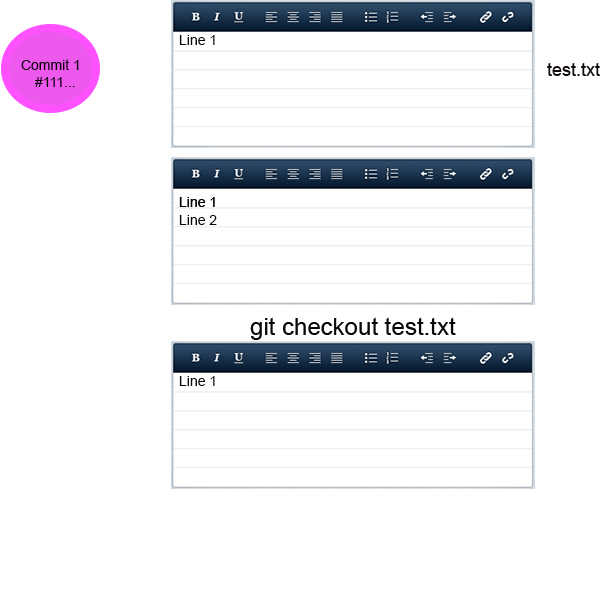
<style>
.page{position:relative;width:600px;height:609px;background:#ffffff}
.page>*{position:absolute;margin:0}
.t1{font:14px "ArialMT";color:#070707}
.t2{font:18px "ArialMT";color:#110b0b}
.t3{font:24px "ArialMT";color:#070707}
</style>
<div class="page">
<p class="t1" style="left:179px;top:35px;width:36px;height:10px">Line 1</p>
<p class="t1" style="left:21px;top:59px;width:58px;height:11px">Commit 1</p>
<p class="t2" style="left:547px;top:63px;width:53px;height:13px">test.txt</p>
<p class="t1" style="left:35px;top:77px;width:40px;height:10px">#111...</p>
<p class="t1" style="left:179px;top:197px;width:36px;height:10px">Line 1</p>
<p class="t1" style="left:179px;top:197px;width:36px;height:10px">Line 1</p>
<p class="t1" style="left:179px;top:215px;width:38px;height:10px">Line 2</p>
<p class="t3" style="left:250px;top:317px;width:206px;height:23px">git checkout test.txt</p>
<p class="t1" style="left:179px;top:376px;width:36px;height:10px">Line 1</p>
</div>
